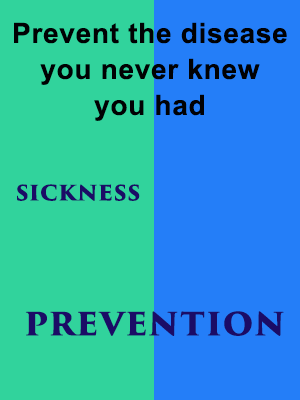
<style>
.page{position:relative;width:300px;height:400px;background:#31d39c}
.page>*{position:absolute;margin:0}
.t1{font:28px/36px "Arial-BoldMT";letter-spacing:0.025em;color:#010103}
.t2{font:24px "TrajanPro3-Bold";letter-spacing:0.025em;color:#1b0c66}
.t3{font:36px "TrajanPro3-Bold";letter-spacing:0.025em;color:#1b0c66}
</style>
<div class="page">
<p class="t1" style="left:14px;top:22px;width:273px;height:99px;text-align:center">Prevent the disease<br>you never knew<br>you had</p>
<p class="t2" style="left:17px;top:184px;width:123px;height:17px">sickness</p>
<p class="t3" style="left:25px;top:311px;width:259px;height:25px">prevention</p>
</div>
